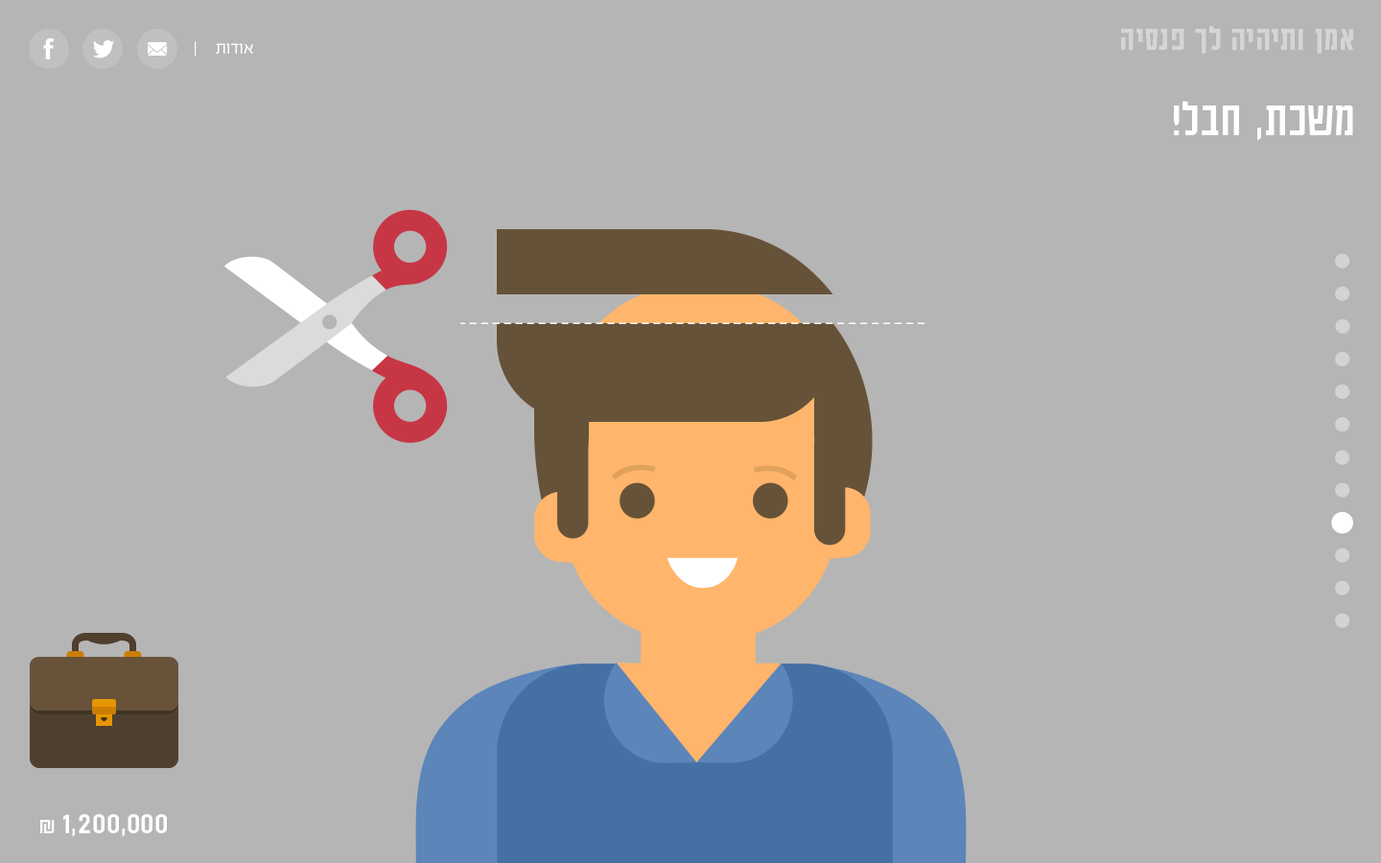
<style>
.page{position:relative;width:1381px;height:863px;background:#b5b5b5}
.page>*{position:absolute;margin:0}
.t1{font:37.8px "AdumaFOT-Medium";color:#d5d5d5}
.t2{font:19.2px "EzerBlock_OE-Light";color:#ffffff}
.t3{font:53.8px "AdumaFOT-Regular";color:#ffffff}
.t4{font:33.6px "AdumaFOT-Regular";color:#ffffff}
.t5{font:24px "AdumaFOT-Regular";color:#ffffff}
</style>
<div class="page">
<p class="t1" style="left:1121px;top:26px;width:232px;height:28px">אמן ותיהיה לך פנסיה</p>
<p class="t2" style="left:195px;top:41px;width:58px;height:16px">אודות     |</p>
<p class="t3" style="left:1174px;top:101px;width:179px;height:40px">משכת, חבל!</p>
<p class="t4" style="left:40px;top:814px;width:127px;height:23px">1,200,000 <span class="t5">₪</span></p>
</div>
